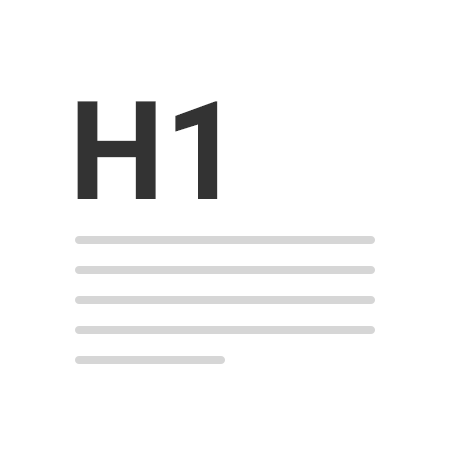
<style>
.page{position:relative;width:450px;height:450px;background:#ffffff}
.page>*{position:absolute;margin:0}
.t1{font:137px "Roboto-Bold";color:#333333}
</style>
<div class="page">
<p class="t1" style="left:77px;top:101px;width:141px;height:98px">H1</p>
</div>
